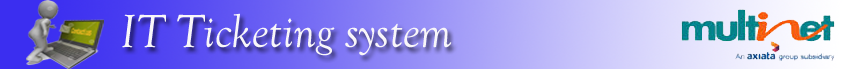
<style>
.page{position:relative;width:845px;height:69px}
.page>*{position:absolute;margin:0}
.t1{font:47.9px "GoudyOldStyleT-Italic";color:#f8f6f9}
</style>
<div class="page">
<p class="t1" style="left:122px;top:13px;width:330px;height:43px">IT Ticketing system</p>
</div>
